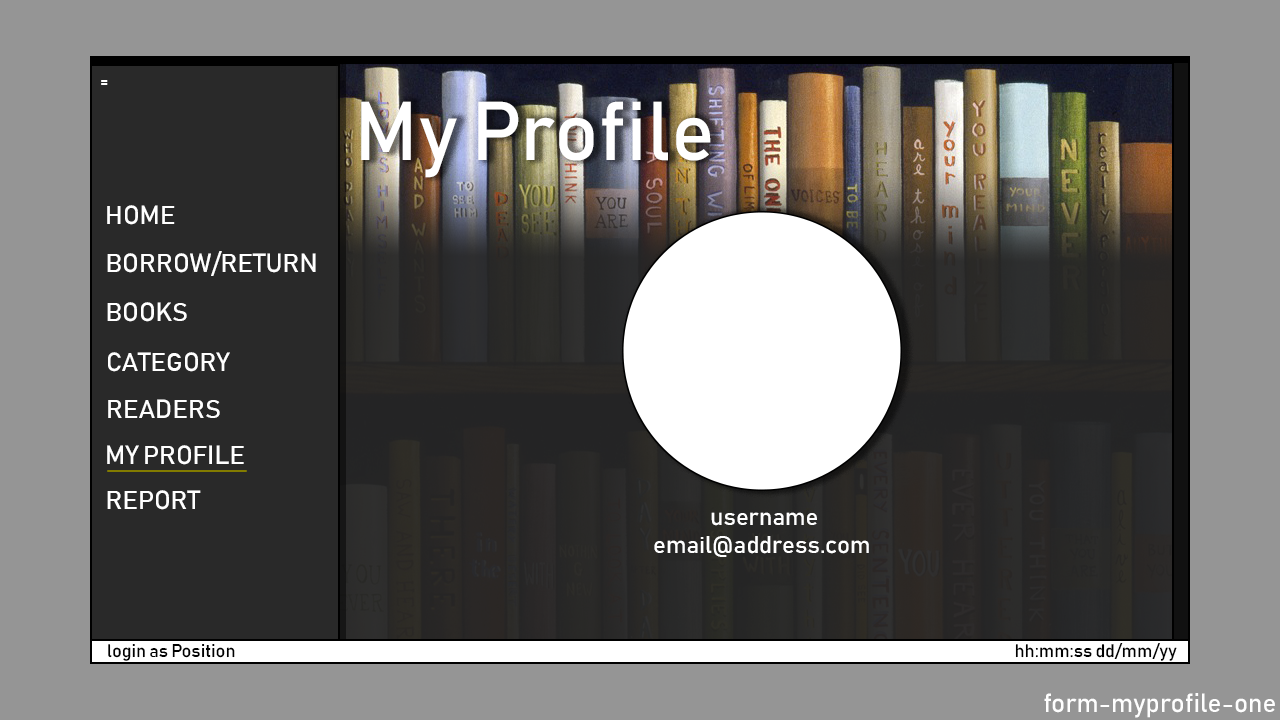
<style>
.page{position:relative;width:1280px;height:720px;background:#959595}
.page>*{position:absolute;margin:0}
.t1{font:18px "Bahnschrift";color:#ffffff}
.t2{font:82px "Bahnschrift";color:#ffffff}
.t3{font:26px "Bahnschrift";color:#ffffff}
.t4{font:24px "Bahnschrift";color:#ffffff}
.t5{font:18px "Bahnschrift";color:#000000}
.t6{font:26px "Bahnschrift";color:#fefefe}
</style>
<div class="page">
<p class="t1" style="left:101px;top:80px;width:7px;height:5px">=</p>
<p class="t2" style="left:361px;top:101px;width:350px;height:77px">My Profile</p>
<p class="t3" style="left:107px;top:205px;width:68px;height:20px">HOME</p>
<p class="t3" style="left:107px;top:251px;width:209px;height:25px">BORROW/RETURN</p>
<p class="t3" style="left:107px;top:302px;width:80px;height:20px">BOOKS</p>
<p class="t3" style="left:108px;top:352px;width:122px;height:20px">CATEGORY</p>
<p class="t3" style="left:108px;top:399px;width:112px;height:19px">READERS</p>
<p class="t3" style="left:107px;top:445px;width:137px;height:20px">MY PROFILE</p>
<p class="t3" style="left:107px;top:490px;width:94px;height:20px">REPORT</p>
<p class="t4" style="left:711px;top:512px;width:106px;height:14px">username</p>
<p class="t4" style="left:654px;top:536px;width:215px;height:21px">email@address.com</p>
<p class="t5" style="left:108px;top:644px;width:127px;height:17px">login as Position</p>
<p class="t5" style="left:1015px;top:643px;width:162px;height:18px">hh:mm:ss dd/mm/yy</p>
<p class="t6" style="left:1044px;top:693px;width:231px;height:25px">form-myprofile-one</p>
</div>
